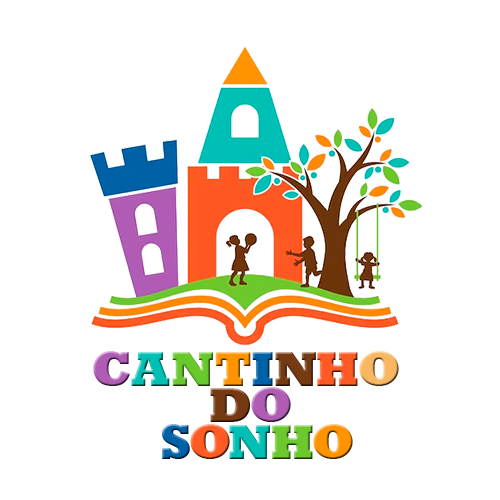
<style>
.page{position:relative;width:500px;height:500px;background:#ffffff}
.page>*{position:absolute;margin:0}
.t1{font:51.4px "Rockwell-ExtraBold";color:#b05cb5}
.t2{font:51.4px "Rockwell-ExtraBold";color:#00bfb3}
.t3{font:51.4px "Rockwell-ExtraBold";color:#67c92c}
.t4{font:51.4px "Rockwell-ExtraBold";color:#ff9400}
.t5{font:51.4px "Rockwell-ExtraBold";color:#0061a6}
.t6{font:51.4px "Rockwell-ExtraBold";color:#753a12}
.t7{font:51.4px "Rockwell-ExtraBold";color:#ff5924}
.t8{font:51.4px "Rockwell-ExtraBold";color:#fab761}
.t9{font:51.4px "Rockwell-ExtraBold";color:#763a12}
.t10{font:51.4px "Rockwell-ExtraBold";color:#ff5b23}
.t11{font:51.4px "Rockwell-ExtraBold";color:#6cc82c}
.t12{font:51.4px "Rockwell-ExtraBold";color:#ff9300}
</style>
<div class="page">
<p class="t1" style="left:93px;top:351px;width:37px;height:35px">C</p>
<p class="t2" style="left:131px;top:352px;width:39px;height:34px">A</p>
<p class="t3" style="left:172px;top:352px;width:41px;height:34px">N</p>
<p class="t4" style="left:215px;top:352px;width:36px;height:34px">T</p>
<p class="t5" style="left:252px;top:352px;width:21px;height:34px">I</p>
<p class="t6" style="left:275px;top:352px;width:41px;height:34px">N</p>
<p class="t7" style="left:317px;top:352px;width:41px;height:34px">H</p>
<p class="t8" style="left:359px;top:351px;width:40px;height:35px">O</p>
<p class="t9" style="left:210px;top:388px;width:41px;height:34px">D</p>
<p class="t1" style="left:251px;top:387px;width:40px;height:35px">O</p>
<p class="t5" style="left:162px;top:424px;width:28px;height:35px">S</p>
<p class="t10" style="left:190px;top:424px;width:40px;height:35px">O</p>
<p class="t2" style="left:229px;top:425px;width:41px;height:34px">N</p>
<p class="t11" style="left:272px;top:425px;width:41px;height:34px">H</p>
<p class="t12" style="left:313px;top:424px;width:40px;height:35px">O</p>
</div>
